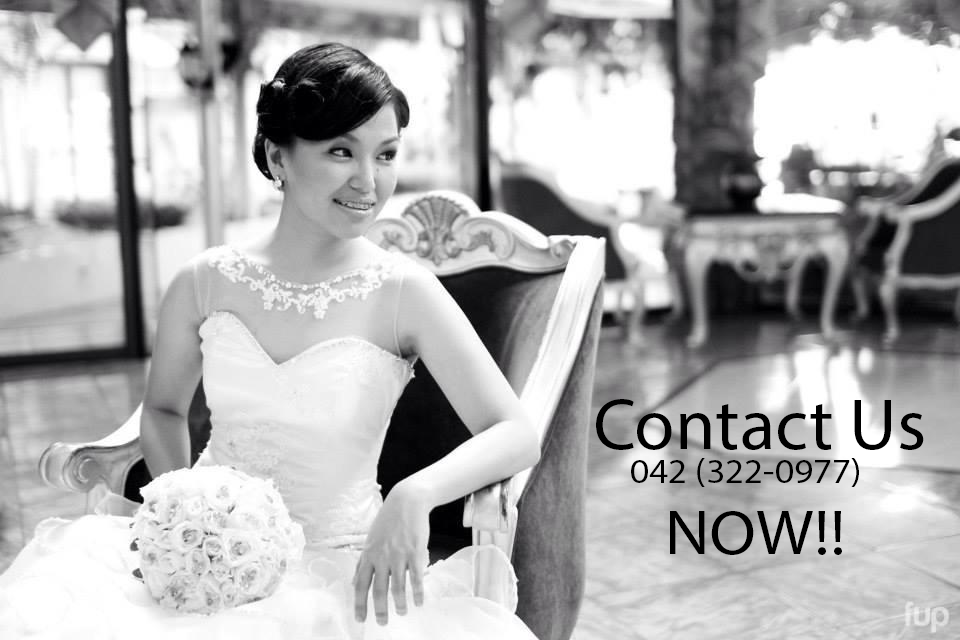
<style>
.page{position:relative;width:960px;height:640px}
.page>*{position:absolute;margin:0}
.t1{font:72.7px "MyriadPro-Regular";color:#000000}
.t2{font:35.4px "MyriadPro-Regular";color:#000000;scale:1.05 1}
.t3{font:63px "MyriadPro-Regular";color:#000000;scale:1.08 1}
</style>
<div class="page">
<p class="t1" style="left:596px;top:399px;width:328px;height:51px">Contact Us</p>
<p class="t2" style="left:631px;top:458px;width:228px;height:29px">042 (322-0977)</p>
<p class="t3" style="left:670px;top:511px;width:172px;height:44px">NOW!!</p>
</div>
